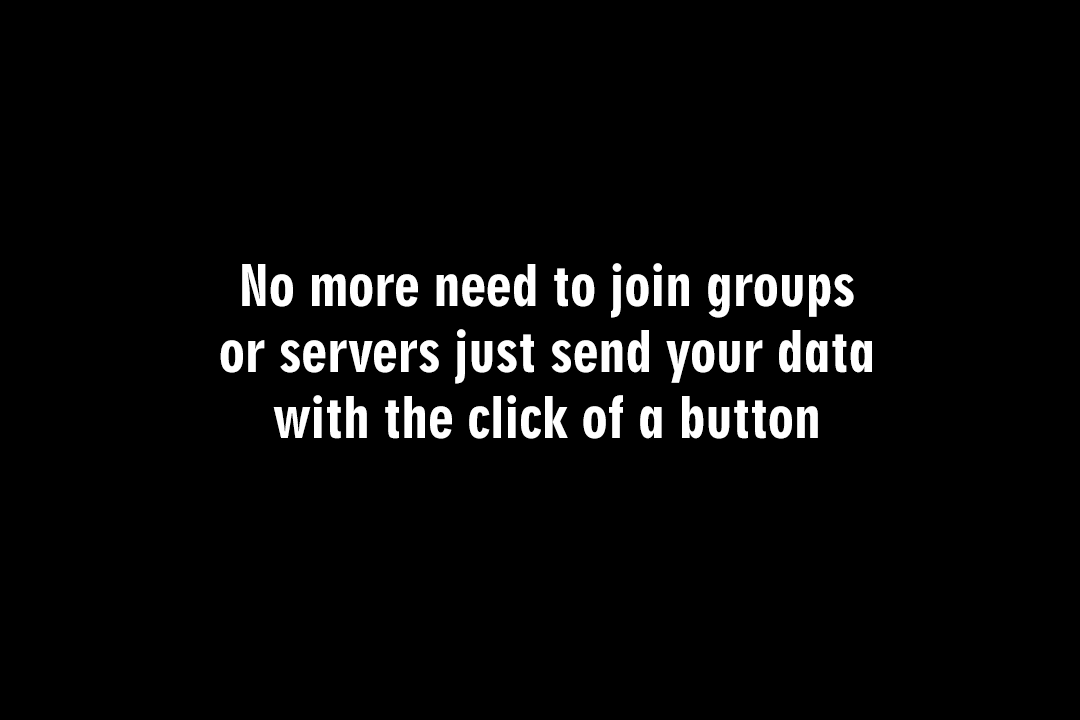
<style>
.page{position:relative;width:1080px;height:720px;background:#000000}
.page>*{position:absolute;margin:0}
.t1{font:55px "Geometric706BT-BlackCondensedB";color:#ffffff}
</style>
<div class="page">
<p class="t1" style="left:220px;top:263px;width:652px;height:176px;text-align:center">No more need to join groups<br>or servers just send your data<br>with the click of a button</p>
</div>
